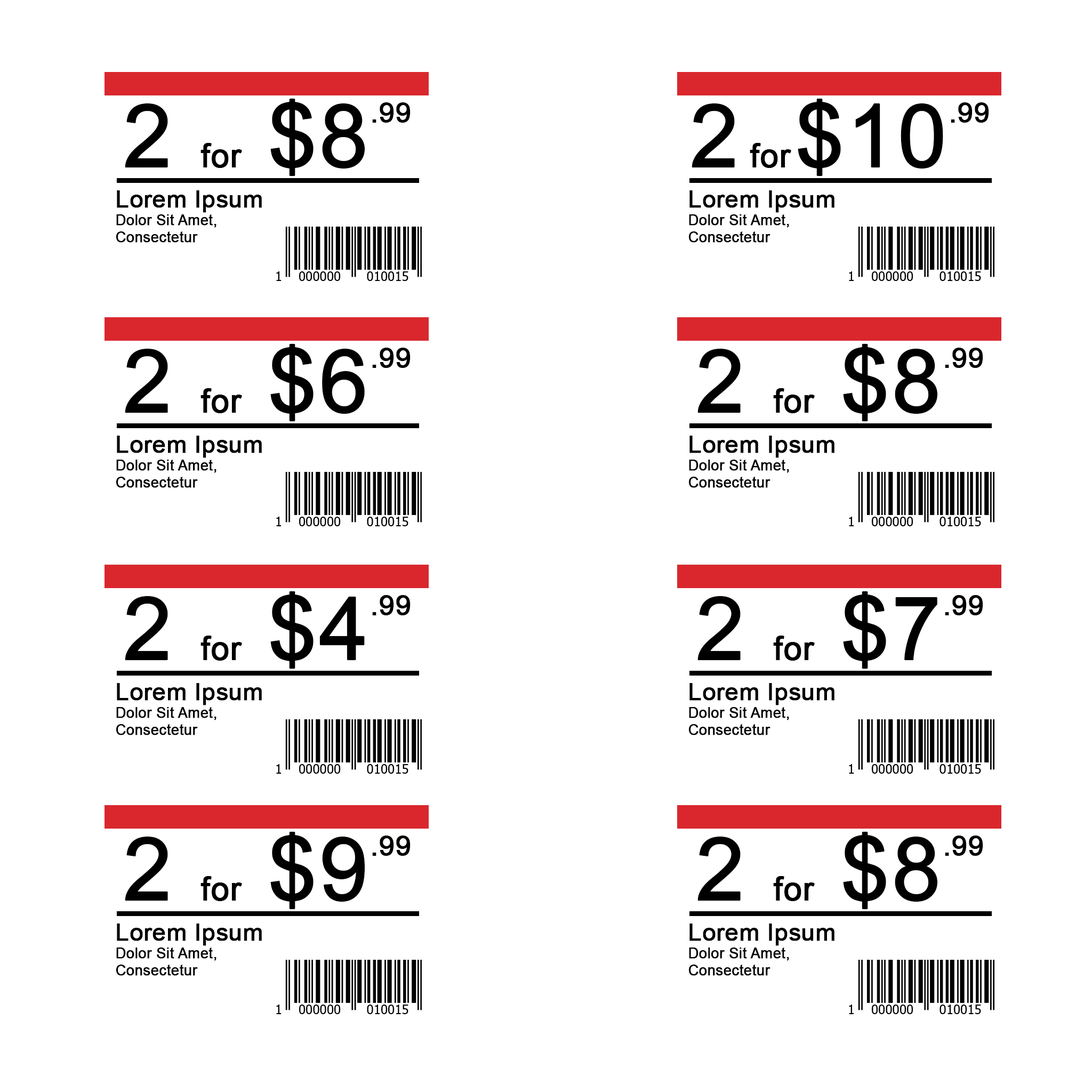
<style>
.page{position:relative;width:1092px;height:1092px;background:#ffffff}
.page>*{position:absolute;margin:0}
.t1{font:32.7px "ArialMT";color:#000000;font-weight:bold}
.t2{font:87.4px "ArialMT";color:#000000;font-weight:bold}
.t3{font:27.8px "ArialMT";color:#000000;font-weight:bold}
.t4{font:14.4px "ArialMT";color:#000000;font-weight:bold}
.t5{font:24.1px "ArialMT";color:#000000;font-weight:bold}
</style>
<div class="page">
<p class="t1" style="left:125px;top:98px;width:286px;height:78px"><span class="t2">2 </span>for<span class="t2"> $8</span><span class="t3">.99</span></p>
<p class="t1" style="left:692px;top:98px;width:297px;height:78px"><span class="t2">2 </span>for <span class="t2">$10</span><span class="t3">.99</span></p>
<p class="t4" style="left:116px;top:190px;width:146px;height:53px"><span class="t5">Lorem Ipsum<br></span>Dolor Sit Amet,<br>Consectetur</p>
<p class="t4" style="left:689px;top:190px;width:145px;height:53px"><span class="t5">Lorem Ipsum<br></span>Dolor Sit Amet,<br>Consectetur</p>
<p class="t1" style="left:125px;top:343px;width:286px;height:79px"><span class="t2">2 </span>for<span class="t2"> $6</span><span class="t3">.99</span></p>
<p class="t1" style="left:697px;top:343px;width:286px;height:79px"><span class="t2">2 </span>for<span class="t2"> $8</span><span class="t3">.99</span></p>
<p class="t4" style="left:116px;top:436px;width:146px;height:52px"><span class="t5">Lorem Ipsum<br></span>Dolor Sit Amet,<br>Consectetur</p>
<p class="t4" style="left:689px;top:436px;width:145px;height:52px"><span class="t5">Lorem Ipsum<br></span>Dolor Sit Amet,<br>Consectetur</p>
<p class="t1" style="left:125px;top:591px;width:286px;height:78px"><span class="t2">2 </span>for<span class="t2"> $4</span><span class="t3">.99</span></p>
<p class="t1" style="left:697px;top:591px;width:286px;height:78px"><span class="t2">2 </span>for<span class="t2"> $7</span><span class="t3">.99</span></p>
<p class="t4" style="left:116px;top:683px;width:146px;height:52px"><span class="t5">Lorem Ipsum<br></span>Dolor Sit Amet,<br>Consectetur</p>
<p class="t4" style="left:689px;top:683px;width:145px;height:52px"><span class="t5">Lorem Ipsum<br></span>Dolor Sit Amet,<br>Consectetur</p>
<p class="t1" style="left:125px;top:831px;width:286px;height:79px"><span class="t2">2 </span>for<span class="t2"> $9</span><span class="t3">.99</span></p>
<p class="t1" style="left:697px;top:831px;width:286px;height:79px"><span class="t2">2 </span>for<span class="t2"> $8</span><span class="t3">.99</span></p>
<p class="t4" style="left:116px;top:923px;width:146px;height:53px"><span class="t5">Lorem Ipsum<br></span>Dolor Sit Amet,<br>Consectetur</p>
<p class="t4" style="left:689px;top:923px;width:145px;height:53px"><span class="t5">Lorem Ipsum<br></span>Dolor Sit Amet,<br>Consectetur</p>
</div>
